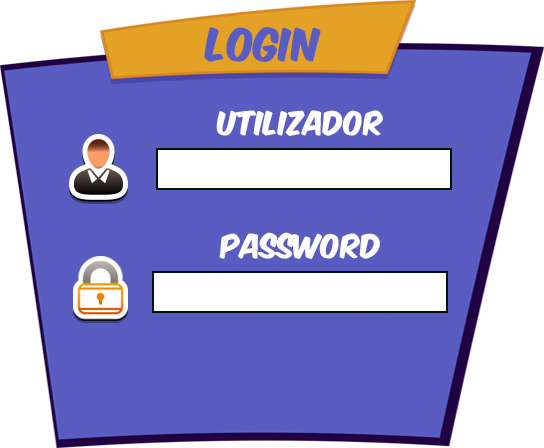
<style>
.page{position:relative;width:544px;height:448px;background:#ffffff}
.page>*{position:absolute;margin:0}
.t1{font:38.8px "KomikaAxis";color:#595cc1}
.t2{font:28px "KomikaAxis";color:#fdfdfd}
</style>
<div class="page">
<p class="t1" style="left:204px;top:27px;width:117px;height:35px">LOGIN</p>
<p class="t2" style="left:216px;top:110px;width:167px;height:26px">utilizador</p>
<p class="t2" style="left:219px;top:232px;width:161px;height:27px">Password</p>
</div>
